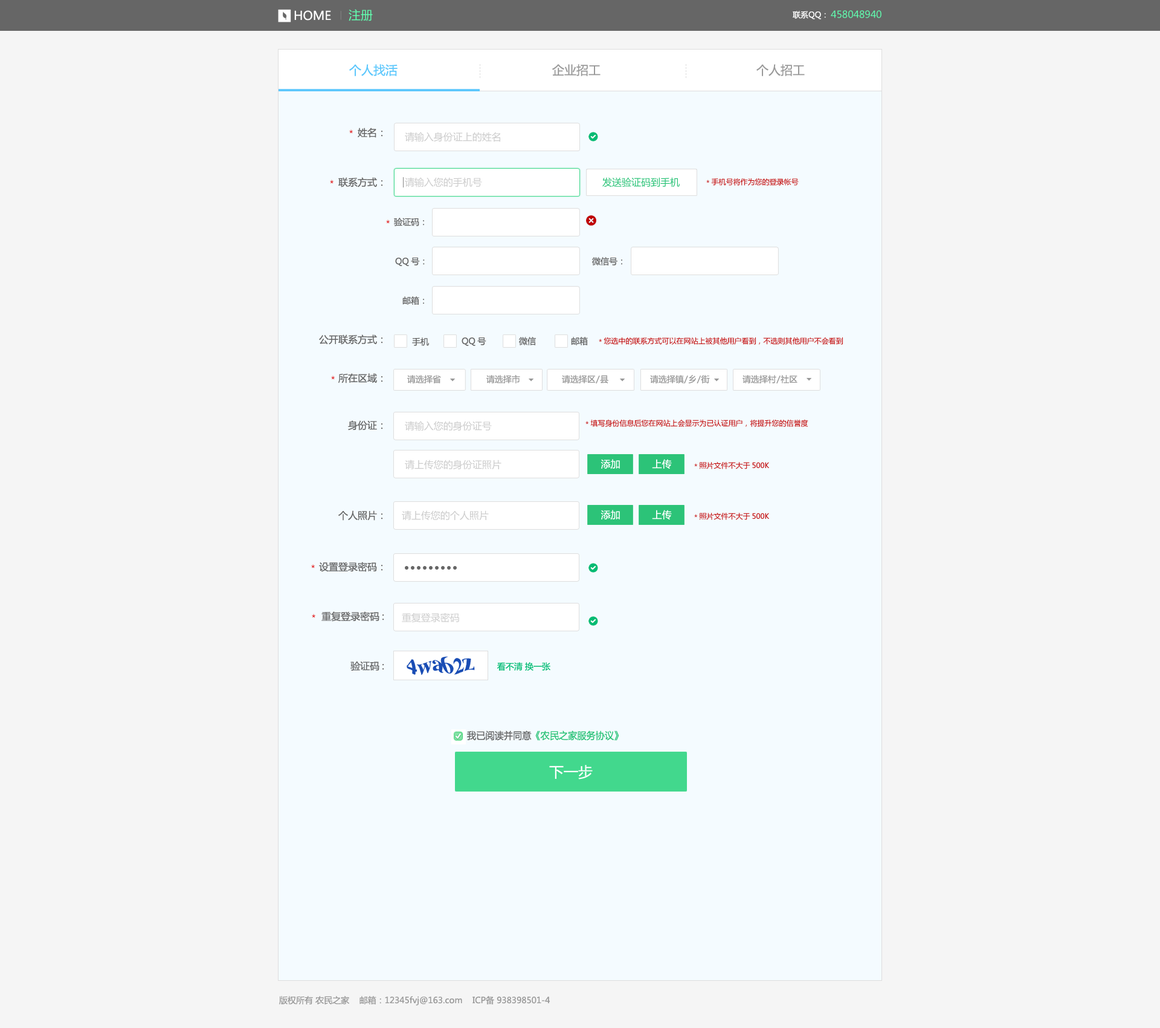
<style>
.page{position:relative;width:1160px;height:1028px;background:#f5f5f5}
.page>*{position:absolute;margin:0}
.t1{font:12.1px "MicrosoftYaHei";color:#ffffff;text-transform:uppercase}
.t2{font:12.1px "MicrosoftYaHei";color:#61feaf;text-transform:uppercase}
.t3{font:7.9px "MicrosoftYaHei";color:#ffffff;text-transform:uppercase}
.t4{font:9.7px "MicrosoftYaHei";color:#60fdaf;text-transform:uppercase}
.t5{font:12.1px "MicrosoftYaHei";color:#5cc7fc}
.t6{font:3.6px "SimSun";letter-spacing:0.36em;color:#dddddd}
.t7{font:12.1px "MicrosoftYaHei";color:#999999}
.t8{font:9.7px/49.6px "MicrosoftYaHei";color:#666666}
.t9{font:9.7px/58px "MicrosoftYaHei";color:#666666}
.t10{font:9.7px/38.7px "MicrosoftYaHei";color:#666666}
.t11{font:9.7px/47.1px "MicrosoftYaHei";color:#666666}
.t12{font:9.7px/42.9px "MicrosoftYaHei";color:#666666}
.t13{font:9.7px/51.4px "MicrosoftYaHei";color:#666666}
.t14{font:9.7px/49px "MicrosoftYaHei";color:#666666}
.t15{font:9.1px "MicrosoftYaHei";scale:0.95 1}
.t16{font:9.7px "MicrosoftYaHei";color:#cccccc}
.t17{font:9.7px "MicrosoftYaHei";color:#2cc378}
.t18{font:7.3px "MicrosoftYaHei";color:#c00000}
.t19{font:8.5px "MicrosoftYaHei";color:#666666}
.t20{font:8.5px "MicrosoftYaHei";color:#999999}
.t21{font:8.5px "MicrosoftYaHei";letter-spacing:-0.2em;color:#999999}
.t22{font:9.7px "MicrosoftYaHei";color:#ffffff}
.t23{font:8.5px "MicrosoftYaHei";color:#04bc74}
.t24{font:9.7px "MicrosoftYaHei";color:#2cc378;scale:0.95 1}
.t25{font:9.7px "MicrosoftYaHei";color:#666666;scale:0.95 1}
.t26{font:14.5px "MicrosoftYaHei";color:#ffffff;text-transform:uppercase}
</style>
<div class="page">
<p class="t1" style="left:294px;top:10px;width:37px;height:11px">home</p>
<p class="t2" style="left:349px;top:9px;width:24px;height:12px">注册</p>
<p class="t3" style="left:793px;top:11px;width:33px;height:8px">联系qq：</p>
<p class="t4" style="left:831px;top:10px;width:51px;height:8px">458048940</p>
<p class="t5" style="left:349px;top:64px;width:49px;height:12px">个人找活</p>
<p class="t6" style="left:480px;top:64px;width:1px;height:14px;rotate:-90deg">-----</p>
<p class="t7" style="left:552px;top:64px;width:49px;height:12px">企业招工</p>
<p class="t6" style="left:686px;top:64px;width:1px;height:14px;rotate:-90deg">-----</p>
<p class="t7" style="left:757px;top:64px;width:48px;height:12px">个人招工</p>
<p class="t8" style="left:319px;top:128px;width:65px;height:542px;text-align:right">姓名：<br><span class="t9">联系方式：<br><br><br></span><span class="t10">公开联系方式：<br></span><span class="t11">所在区域：<br></span><span class="t12">身份证：<br><br></span><span class="t13">个人照片：<br></span>设置登录密码：<br>重复登录密码<span class="t14">:<br></span>验证码<span class="t14">:</span></p>
<p class="t15" style="left:349px;top:129px;width:4px;height:5px">*</p>
<p class="t16" style="left:405px;top:132px;width:95px;height:10px">请输入身份证上的姓名</p>
<p class="t15" style="left:330px;top:180px;width:4px;height:4px">*</p>
<p class="t16" style="left:405px;top:177px;width:77px;height:10px">请输入您的手机号</p>
<p class="t17" style="left:603px;top:177px;width:77px;height:10px">发送验证码到手机</p>
<p class="t18" style="left:707px;top:178px;width:92px;height:8px">*手机号将作为您的登录帐号</p>
<p class="t15" style="left:386px;top:219px;width:4px;height:5px">*</p>
<p class="t19" style="left:394px;top:218px;width:30px;height:8px">验证码：</p>
<p class="t19" style="left:395px;top:257px;width:30px;height:9px">QQ号：</p>
<p class="t19" style="left:592px;top:257px;width:31px;height:8px">微信号：</p>
<p class="t19" style="left:403px;top:296px;width:21px;height:9px">邮箱：</p>
<p class="t19" style="left:412px;top:337px;width:17px;height:9px">手机</p>
<p class="t19" style="left:462px;top:337px;width:25px;height:9px">QQ号</p>
<p class="t19" style="left:519px;top:337px;width:17px;height:8px">微信</p>
<p class="t19" style="left:571px;top:337px;width:17px;height:8px">邮箱</p>
<p class="t18" style="left:599px;top:337px;width:244px;height:8px">*您选中的联系方式可以在网站上被其他用户看到，不选则其他用户不会看到</p>
<p class="t15" style="left:331px;top:375px;width:4px;height:5px">*</p>
<p class="t20" style="left:407px;top:375px;width:34px;height:8px">请选择省</p>
<p class="t20" style="left:487px;top:375px;width:33px;height:8px">请选择市</p>
<p class="t20" style="left:562px;top:375px;width:47px;height:8px">请选择<span class="t21">区/</span>县</p>
<p class="t21" style="left:650px;top:375px;width:60px;height:8px"><span class="t20">请选择</span>镇/乡/<span class="t20">街</span></p>
<p class="t20" style="left:743px;top:375px;width:55px;height:8px">请选择<span class="t21">村/</span>社区</p>
<p class="t16" style="left:405px;top:421px;width:87px;height:10px">请输入您的身份证号</p>
<p class="t18" style="left:586px;top:419px;width:223px;height:8px">*填写身份信息后您在网站上会显示为已认证用户，将提升您的信誉度</p>
<p class="t16" style="left:405px;top:459px;width:97px;height:10px">请上传您的身份证照片</p>
<p class="t22" style="left:601px;top:459px;width:19px;height:10px">添加</p>
<p class="t22" style="left:652px;top:459px;width:20px;height:10px">上传</p>
<p class="t18" style="left:694px;top:462px;width:75px;height:7px">*照片文件不大于500K</p>
<p class="t22" style="left:601px;top:510px;width:19px;height:10px">添加</p>
<p class="t22" style="left:652px;top:510px;width:20px;height:10px">上传</p>
<p class="t16" style="left:402px;top:510px;width:87px;height:10px">请上传您的个人照片</p>
<p class="t18" style="left:694px;top:513px;width:75px;height:7px">*照片文件不大于500K</p>
<p class="t15" style="left:311px;top:564px;width:4px;height:4px">*</p>
<p class="t15" style="left:312px;top:613px;width:4px;height:5px">*</p>
<p class="t16" style="left:402px;top:612px;width:57px;height:11px">重复登录密码</p>
<p class="t23" style="left:497px;top:662px;width:54px;height:8px">看不清 换一张</p>
<p class="t24" style="left:467px;top:730px;width:153px;height:10px"><span class="t25">我已阅读并同意</span>《农民之家服务协议》</p>
<p class="t26" style="left:549px;top:765px;width:44px;height:14px">下一步</p>
<p class="t20" style="left:279px;top:995px;width:271px;height:10px">版权所有 农民之家    邮箱：12345fvj@163.com    ICP备 938398501-4</p>
</div>
